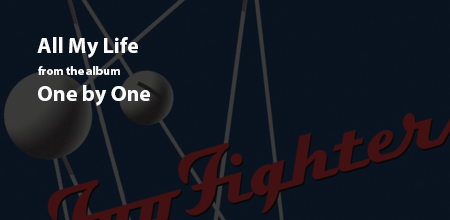
<style>
.page{position:relative;width:450px;height:220px;background:#091320}
.page>*{position:absolute;margin:0}
.t1{font:22px "MyriadPro-Bold";color:#fbfbfb}
.t2{font:12px "MyriadPro-Bold";color:#fbfbfb}
</style>
<div class="page">
<p class="t1" style="left:37px;top:37px;width:101px;height:21px">All My Life</p>
<p class="t2" style="left:38px;top:66px;width:82px;height:9px">from the album</p>
<p class="t1" style="left:38px;top:85px;width:112px;height:21px">One by One</p>
</div>
